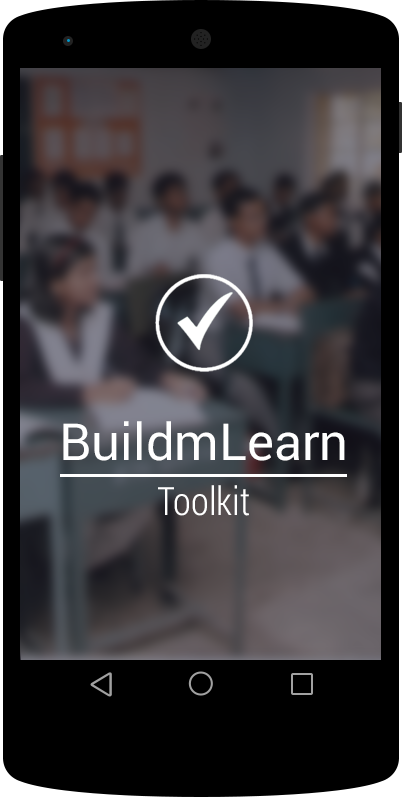
<style>
.page{position:relative;width:402px;height:797px;background:#000000}
.page>*{position:absolute;margin:0}
.t1{font:51px/55px "Roboto-Regular";color:#ffffff}
.t2{font:39px/55px "RobotoCondensed-Light";color:#ffffff}
</style>
<div class="page">
<p class="t1" style="left:63px;top:421px;width:282px;height:95px;text-align:center">BuildmLearn<br><span class="t2">Toolkit</span></p>
</div>
